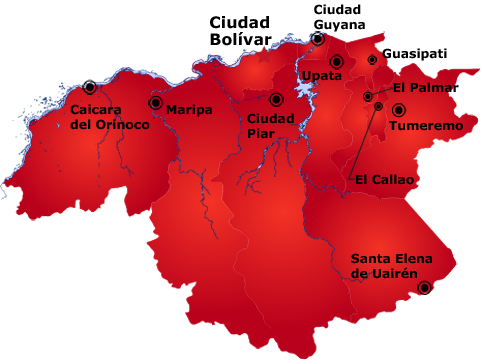
<style>
.page{position:relative;width:482px;height:364px;background:#ffffff}
.page>*{position:absolute;margin:0}
.t1{font:12.4px/14.8px "Verdana-Bold";color:#000000}
.t2{font:15.9px/16.9px "Verdana-Bold";color:#000000}
.t3{font:12.4px "Verdana-Bold";color:#000000}
</style>
<div class="page">
<p class="t1" style="left:314px;top:4px;width:51px;height:28px">Ciudad<br>Guyana</p>
<p class="t2" style="left:210px;top:16px;width:62px;height:30px">Ciudad <br>Bolívar</p>
<p class="t3" style="left:382px;top:48px;width:65px;height:13px">Guasipati</p>
<p class="t3" style="left:302px;top:71px;width:40px;height:12px">Upata</p>
<p class="t3" style="left:393px;top:82px;width:66px;height:11px">El Palmar</p>
<p class="t1" style="left:70px;top:104px;width:80px;height:26px">Caicara<br>del Orinoco</p>
<p class="t3" style="left:166px;top:104px;width:46px;height:13px">Maripa</p>
<p class="t1" style="left:247px;top:113px;width:47px;height:26px">Ciudad <br>Piar</p>
<p class="t3" style="left:389px;top:121px;width:74px;height:10px">Tumeremo</p>
<p class="t3" style="left:356px;top:174px;width:58px;height:11px">El Callao</p>
<p class="t1" style="left:351px;top:253px;width:81px;height:26px">Santa Elena <br>de Uairén</p>
</div>
